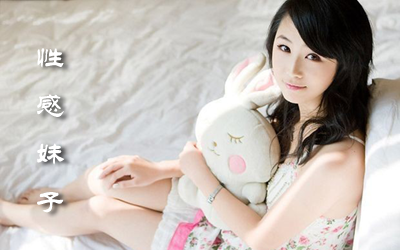
<style>
.page{position:relative;width:400px;height:250px}
.page>*{position:absolute;margin:0}
.t1{font:30px/48px "STLiti";color:#ffffff}
</style>
<div class="page">
<p class="t1" style="left:37px;top:48px;width:28px;height:165px">性<br>感<br>妹<br>子</p>
</div>
